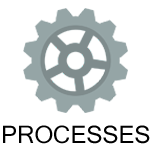
<style>
.page{position:relative;width:150px;height:150px;background:#ffffff}
.page>*{position:absolute;margin:0}
.t1{font:24px "MicrosoftSansSerif";color:#000000}
</style>
<div class="page">
<p class="t1" style="left:3px;top:125px;width:147px;height:19px">PROCESSES</p>
</div>
